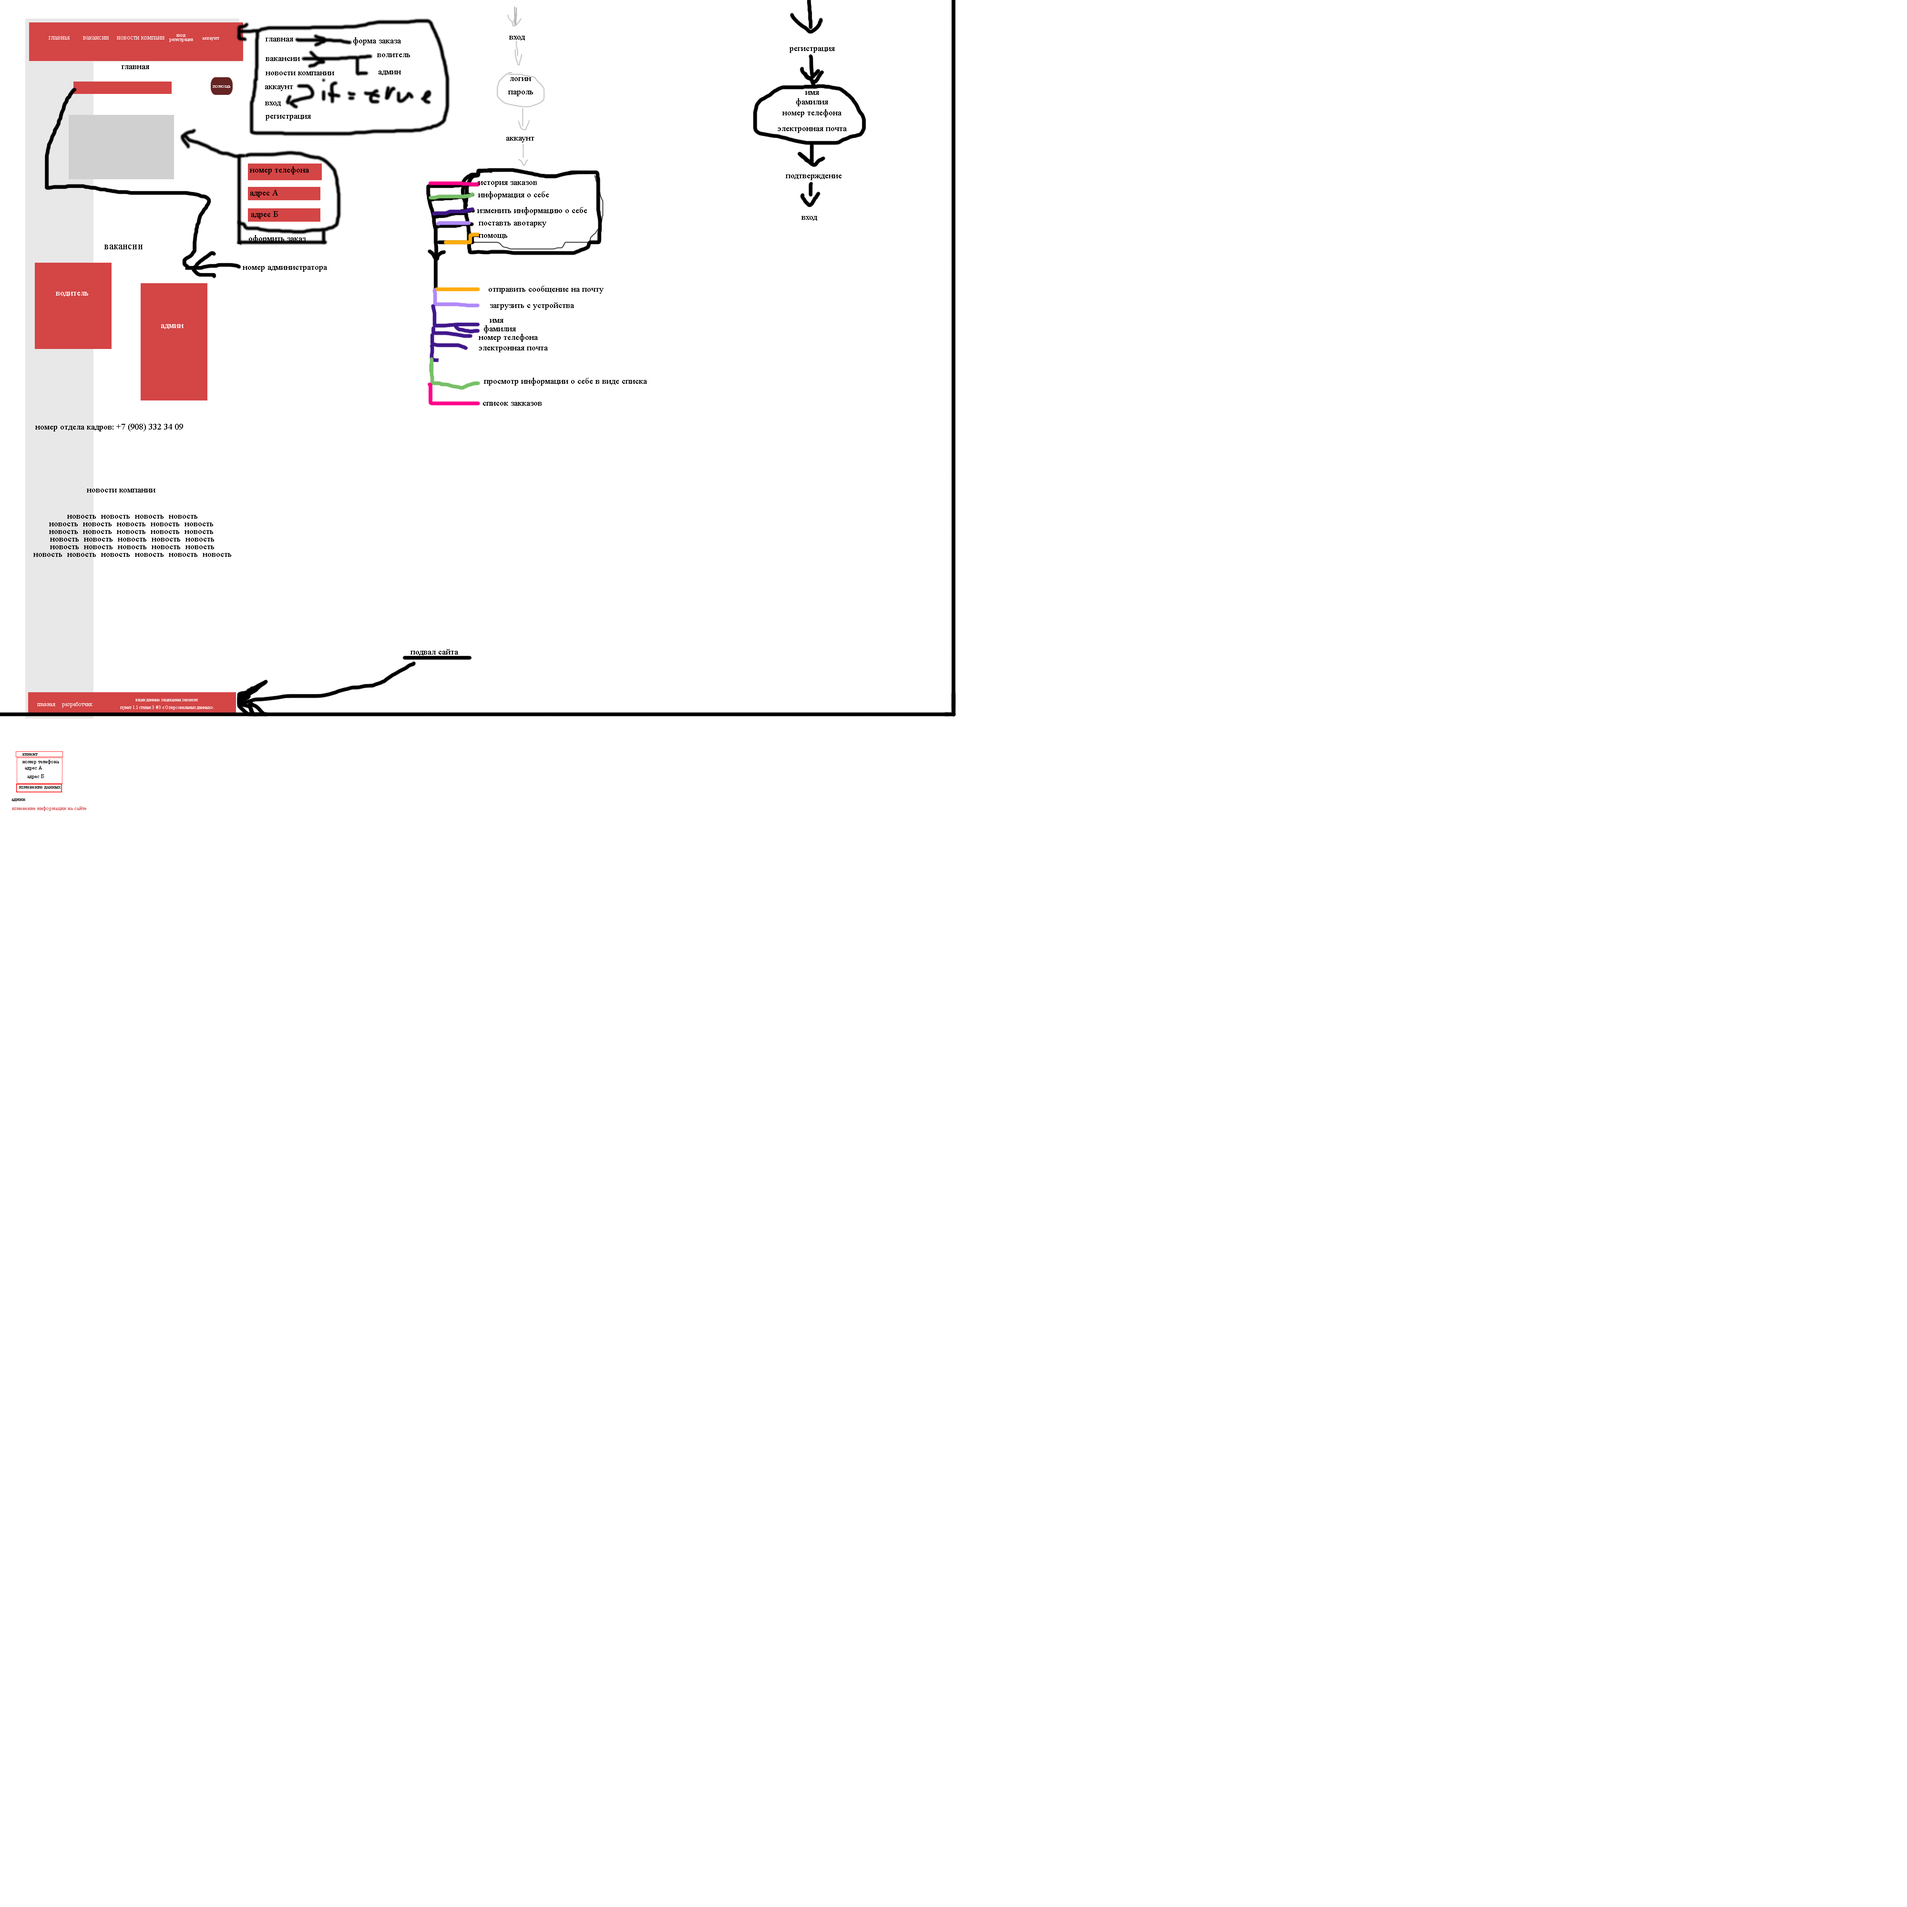
<style>
.page{position:relative;width:1907px;height:1907px;background:#ffffff}
.page>*{position:absolute;margin:0}
.t1{font:6.7px "TimesNewRomanPSMT";color:#ffffff}
.t2{font:4.3px "TimesNewRomanPSMT";color:#ffffff}
.t3{font:5.2px "TimesNewRomanPSMT";color:#ffffff}
.t4{font:8.6px "TimesNewRomanPSMT";color:#000000}
.t5{font:10px "TimesNewRomanPSMT";color:#000000}
.t6{font:8.6px "TimesNewRomanPSMT";color:#ffffff}
.t7{font:8.6px "TimesNewRomanPSMT";color:#010101}
.t8{font:8.6px/7.6px "TimesNewRomanPSMT";color:#000000}
.t9{font:4.3px/7.6px "TimesNewRomanPSMT";color:#ffffff}
.t10{font:5.7px "TimesNewRomanPSMT";color:#ffffff}
.t11{font:5.2px "TimesNewRomanPSMT";color:#000000}
.t12{font:5.2px "TimesNewRomanPSMT";color:#d44545}
</style>
<div class="page">
<p class="t1" style="left:49px;top:36px;width:21px;height:4px">главная</p>
<p class="t1" style="left:83px;top:36px;width:26px;height:4px">вакансии</p>
<p class="t1" style="left:117px;top:36px;width:48px;height:4px">новости компани</p>
<p class="t2" style="left:169px;top:39px;width:24px;height:3px">регистрация</p>
<p class="t2" style="left:176px;top:34px;width:9px;height:3px">вход</p>
<p class="t3" style="left:202px;top:37px;width:17px;height:4px">аккаунт</p>
<p class="t4" style="left:266px;top:38px;width:27px;height:3px">главная</p>
<p class="t4" style="left:353px;top:37px;width:48px;height:8px">форма заказа</p>
<p class="t4" style="left:509px;top:36px;width:16px;height:5px">вход</p>
<p class="t4" style="left:377px;top:53px;width:33px;height:4px">волитель</p>
<p class="t4" style="left:790px;top:47px;width:45px;height:6px">регистрация</p>
<p class="t4" style="left:122px;top:65px;width:27px;height:4px">главная</p>
<p class="t4" style="left:266px;top:57px;width:34px;height:4px">вакансии</p>
<p class="t4" style="left:266px;top:72px;width:68px;height:3px">новости компании</p>
<p class="t4" style="left:379px;top:71px;width:22px;height:4px">админ</p>
<p class="t4" style="left:510px;top:77px;width:21px;height:4px">логин</p>
<p class="t3" style="left:213px;top:85px;width:17px;height:3px">помощь</p>
<p class="t4" style="left:265px;top:85px;width:28px;height:6px">аккаунт</p>
<p class="t4" style="left:265px;top:102px;width:16px;height:4px">вход</p>
<p class="t4" style="left:508px;top:91px;width:25px;height:5px">пароль</p>
<p class="t4" style="left:796px;top:98px;width:32px;height:8px">фамилия</p>
<p class="t4" style="left:805px;top:91px;width:14px;height:4px">имя</p>
<p class="t4" style="left:783px;top:109px;width:59px;height:8px">номер телефона</p>
<p class="t4" style="left:266px;top:115px;width:45px;height:6px">регистрация</p>
<p class="t4" style="left:506px;top:137px;width:29px;height:6px">аккаунт</p>
<p class="t4" style="left:778px;top:127px;width:69px;height:6px">электронная почта</p>
<p class="t4" style="left:250px;top:166px;width:59px;height:9px">номер телефона</p>
<p class="t4" style="left:478px;top:181px;width:59px;height:6px">история заказов</p>
<p class="t4" style="left:786px;top:175px;width:56px;height:5px">подтверждение</p>
<p class="t4" style="left:250px;top:190px;width:28px;height:7px">адрес А</p>
<p class="t4" style="left:478px;top:191px;width:71px;height:8px">информация о себе</p>
<p class="t4" style="left:477px;top:207px;width:110px;height:8px">изменить информацию о себе</p>
<p class="t4" style="left:251px;top:211px;width:27px;height:8px">адрес Б</p>
<p class="t4" style="left:479px;top:222px;width:67px;height:5px">поставть авотарку</p>
<p class="t4" style="left:802px;top:216px;width:15px;height:5px">вход</p>
<p class="t5" style="left:104px;top:245px;width:39px;height:4px">вакансии</p>
<p class="t4" style="left:249px;top:235px;width:57px;height:8px">оформить заказ</p>
<p class="t4" style="left:479px;top:234px;width:28px;height:5px">помощь</p>
<p class="t4" style="left:243px;top:266px;width:84px;height:6px">номер администратора</p>
<p class="t6" style="left:56px;top:292px;width:32px;height:5px">водитель</p>
<p class="t4" style="left:489px;top:286px;width:115px;height:8px">отправить сообщение на почту</p>
<p class="t4" style="left:490px;top:302px;width:84px;height:8px">загрузить с устройства</p>
<p class="t6" style="left:161px;top:324px;width:23px;height:5px">админ</p>
<p class="t4" style="left:484px;top:325px;width:32px;height:8px">фамилия</p>
<p class="t4" style="left:490px;top:319px;width:14px;height:4px">имя</p>
<p class="t4" style="left:479px;top:334px;width:59px;height:8px">номер телефона</p>
<p class="t4" style="left:479px;top:347px;width:69px;height:5px">электронная почта</p>
<p class="t4" style="left:484px;top:378px;width:163px;height:8px">просмотр информации о себе в виде списка</p>
<p class="t4" style="left:483px;top:402px;width:59px;height:4px">список закказов</p>
<p class="t4" style="left:35px;top:423px;width:148px;height:9px">номер отдела кадров: +7 (908) 332 34 09</p>
<p class="t7" style="left:87px;top:489px;width:68px;height:4px">новости компании</p>
<p class="t8" style="left:33px;top:515px;width:198px;height:42px;text-align:center">новость  новость  новость  новость  <br>новость  новость  новость  новость  новость  <br>новость  новость  новость  новость  новость  <br>новость  новость  новость  новость  новость <br> новость  новость  новость  новость  новость  <br>новость  новость  новость  новость  новость  новость</p>
<p class="t4" style="left:411px;top:649px;width:47px;height:7px">подвал сайта</p>
<p class="t9" style="left:105px;top:699px;width:124px;height:26px;text-align:center">ваши данные защищены законом<br> пункт 1.1 статьи 3 ФЗ «О персональных данных».<br><br>Источник: https://mediapravo.com/privacy/rasprostranenie-pd.html</p>
<p class="t10" style="left:37px;top:703px;width:18px;height:3px">главная</p>
<p class="t10" style="left:62px;top:702px;width:31px;height:6px">разработчик</p>
<p class="t11" style="left:22px;top:753px;width:16px;height:3px">клиент</p>
<p class="t11" style="left:22px;top:760px;width:37px;height:4px">номер телефона</p>
<p class="t11" style="left:25px;top:766px;width:17px;height:5px">адрес А</p>
<p class="t11" style="left:27px;top:774px;width:17px;height:5px">адрес Б</p>
<p class="t11" style="left:19px;top:786px;width:42px;height:3px">изменение данных</p>
<p class="t11" style="left:11px;top:799px;width:14px;height:3px">админ</p>
<p class="t12" style="left:12px;top:806px;width:74px;height:5px">изменение информации на сайте</p>
</div>
